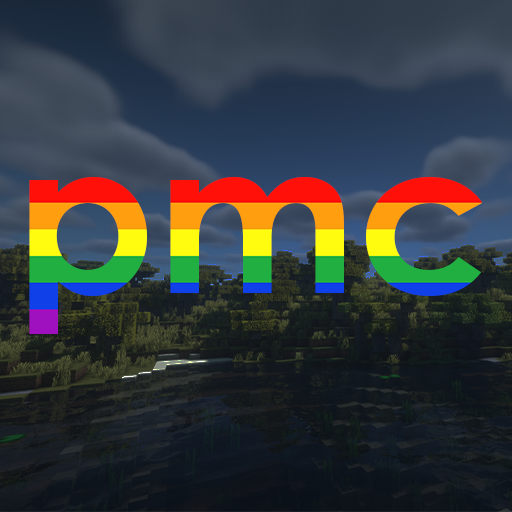
<style>
.page{position:relative;width:512px;height:512px}
.page>*{position:absolute;margin:0}
.t1{font:213.6px "CenturyGothicPro-Bold"}
</style>
<div class="page">
<p class="t1" style="left:29px;top:177px;width:454px;height:157px">pmc</p>
</div>
